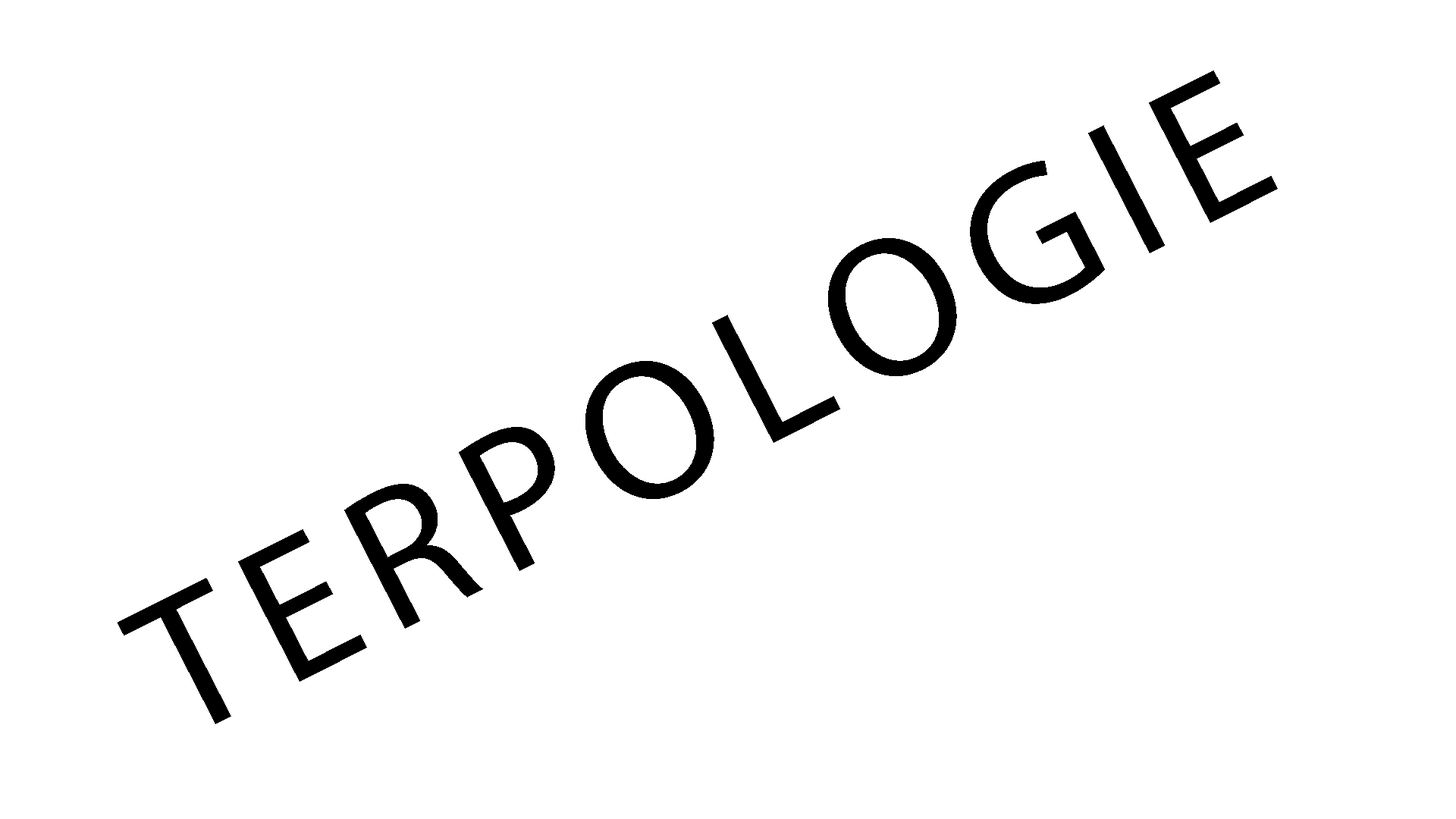
<style>
.page{position:relative;width:1456px;height:819px;background:#ffffff}
.page>*{position:absolute;margin:0}
.t1{font:200.1px "MyriadPro-Regular";letter-spacing:0.1em;color:#000000}
</style>
<div class="page">
<p class="t1" style="left:118px;top:71px;width:1160px;height:653px;rotate:-27deg">TERPOLOGIE</p>
</div>
